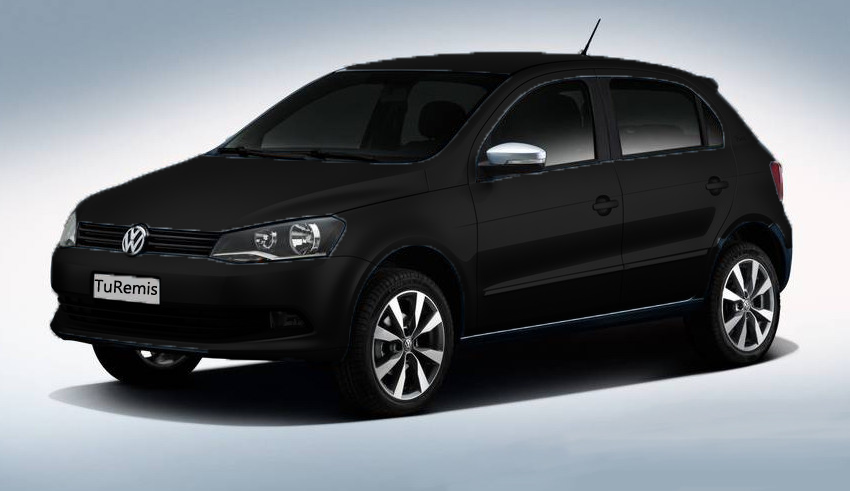
<style>
.page{position:relative;width:850px;height:491px}
.page>*{position:absolute;margin:0}
.t1{font:17px "MicrosoftNewTaiLue";color:#000000}
</style>
<div class="page">
<p class="t1" style="left:94px;top:279px;width:63px;height:16px;rotate:3deg">TuRemis</p>
</div>
